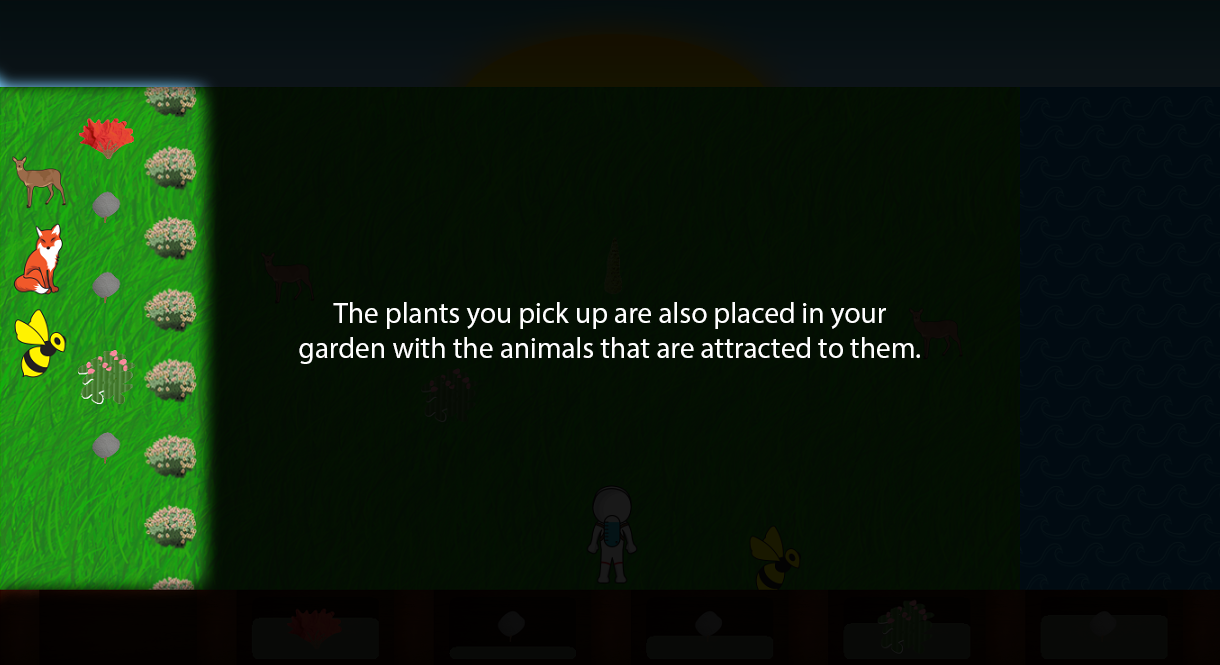
<style>
.page{position:relative;width:1220px;height:665px}
.page>*{position:absolute;margin:0}
.t1{font:29.3px "MyriadPro-Regular";color:#ffffff}
</style>
<div class="page">
<p class="t1" style="left:299px;top:302px;width:621px;height:62px;text-align:center">The plants you pick up are also placed in your garden with the animals that are attracted to them.</p>
</div>
